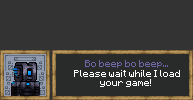
<style>
.page{position:relative;width:193px;height:100px;background:#333333}
.page>*{position:absolute;margin:0}
.t1{font:8px "Minecraft";color:#ffffff}
.t2{font:8px "Minecraft";color:#7166a5}
</style>
<div class="page">
<p class="t1" style="left:74px;top:60px;width:106px;height:27px;text-align:center"><span class="t2">Bo beep bo beep...<br></span>Please wait while I load<br>your game!</p>
</div>
